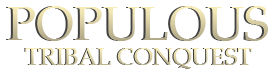
<style>
.page{position:relative;width:272px;height:75px;background:#ffffff}
.page>*{position:absolute;margin:0}
.t1{font:48px "PalatinoLinotype-Roman"}
.t2{font:24px "PalatinoLinotype-Roman"}
</style>
<div class="page">
<p class="t1" style="left:8px;top:6px;width:260px;height:35px">POPULOUS</p>
<p class="t2" style="left:25px;top:48px;width:227px;height:21px">TRIBAL CONQUEST</p>
</div>
